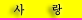
<style>
.page{position:relative;width:82px;height:20px;background:#ffff00}
.page>*{position:absolute;margin:0}
.t1{font:12px "BatangChe";color:#000000;scale:0.9 1}
</style>
<div class="page">
<p class="t1" style="left:14px;top:4px;width:49px;height:12px">사     랑</p>
</div>
